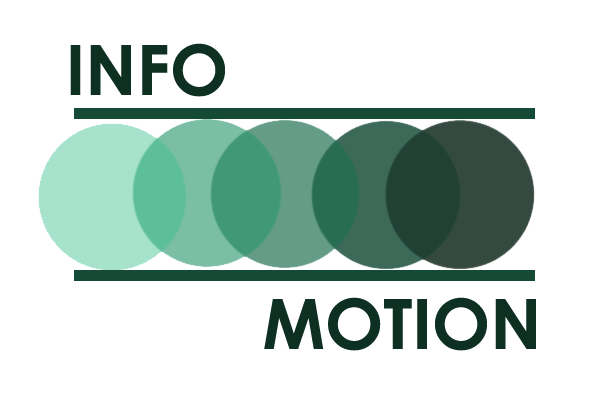
<style>
.page{position:relative;width:608px;height:400px;background:#ffffff}
.page>*{position:absolute;margin:0}
.t1{font:69.4px "CenturyGothic-Bold";color:#0d3023}
</style>
<div class="page">
<p class="t1" style="left:70px;top:43px;width:155px;height:54px">INFO</p>
<p class="t1" style="left:264px;top:297px;width:272px;height:54px">MOTION</p>
</div>
